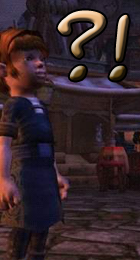
<style>
.page{position:relative;width:140px;height:260px}
.page>*{position:absolute;margin:0}
.t1{font:98px "ComicStripMN";scale:0.81 1}
</style>
<div class="page">
<p class="t1" style="left:57px;top:10px;width:72px;height:71px">?!</p>
</div>
